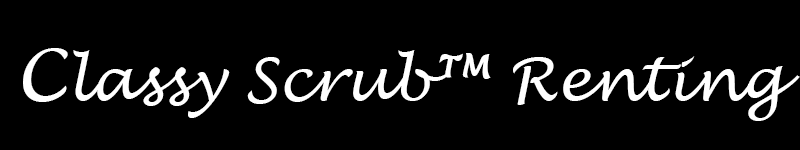
<style>
.page{position:relative;width:800px;height:150px;background:#000000}
.page>*{position:absolute;margin:0}
.t1{font:60px "LucidaHandwriting-Italic";color:#ffffff}
.t2{font:72px "LucidaHandwriting-Italic";color:#ffffff}
</style>
<div class="page">
<p class="t1" style="left:23px;top:48px;width:777px;height:73px"><span class="t2">C</span>lassy Scrub™ Renting</p>
</div>
